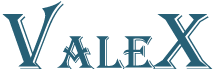
<style>
.page{position:relative;width:216px;height:69px;background:#ffffff}
.page>*{position:absolute;margin:0}
.t1{font:50px "Algerian";letter-spacing:0.01em;color:#276076}
.t2{font:83.3px "Algerian";letter-spacing:0.01em;color:#276076}
</style>
<div class="page">
<p class="t1" style="left:2px;top:1px;width:211px;height:69px"><span class="t2">V</span>ale<span class="t2">x</span></p>
</div>
